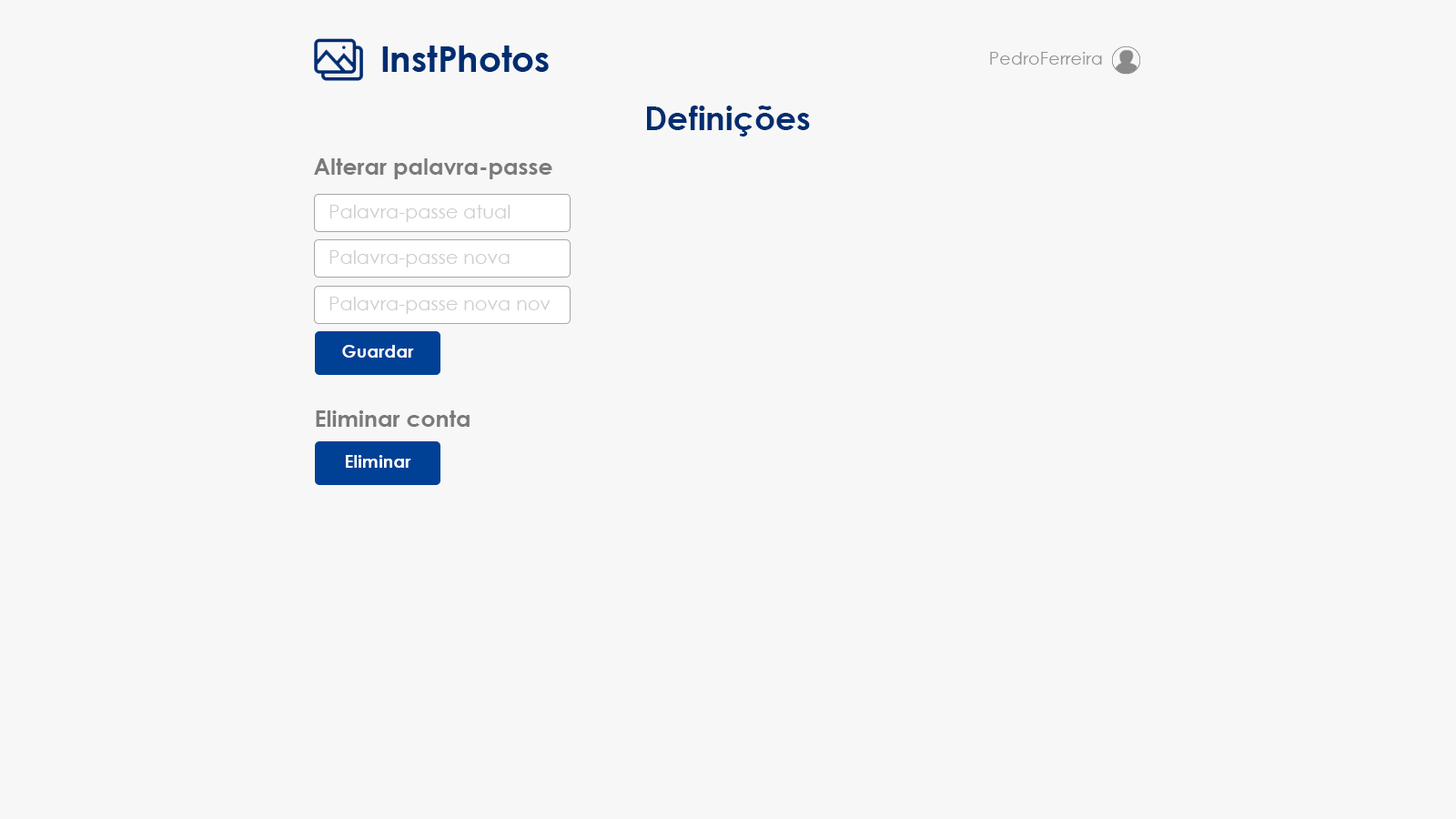
<style>
.page{position:relative;width:1456px;height:819px;background:#f7f7f7}
.page>*{position:absolute;margin:0}
.t1{font:17.7px "CenturyGothic";color:#929292}
.t2{font:32.9px "CenturyGothic-Bold";color:#002d70}
.t3{font:22.8px "CenturyGothic-Bold";color:#7a7a7a}
.t4{font:19px "CenturyGothic";color:#cfcdcd}
.t5{font:17.7px "CenturyGothic-Bold";color:#ffffff}
</style>
<div class="page">
<p class="t1" style="left:990px;top:52px;width:112px;height:13px">PedroFerreira</p>
<p class="t2" style="left:647px;top:106px;width:163px;height:30px">Definições</p>
<p class="t3" style="left:314px;top:158px;width:238px;height:21px">Alterar palavra-passe</p>
<p class="t4" style="left:329px;top:205px;width:182px;height:17px">Palavra-passe atual</p>
<p class="t4" style="left:329px;top:250px;width:181px;height:18px">Palavra-passe nova</p>
<p class="t4" style="left:329px;top:297px;width:222px;height:17px">Palavra-passe nova nov</p>
<p class="t5" style="left:342px;top:345px;width:72px;height:13px">Guardar</p>
<p class="t3" style="left:316px;top:410px;width:154px;height:17px">Eliminar conta</p>
<p class="t5" style="left:346px;top:455px;width:65px;height:13px">Eliminar</p>
</div>
